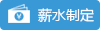
<style>
.page{position:relative;width:100px;height:30px;background:#3998d6}
.page>*{position:absolute;margin:0}
.t1{font:14px "MicrosoftYaHei";color:#ffffff}
</style>
<div class="page">
<p class="t1" style="left:38px;top:8px;width:56px;height:15px">薪水制定</p>
</div>
